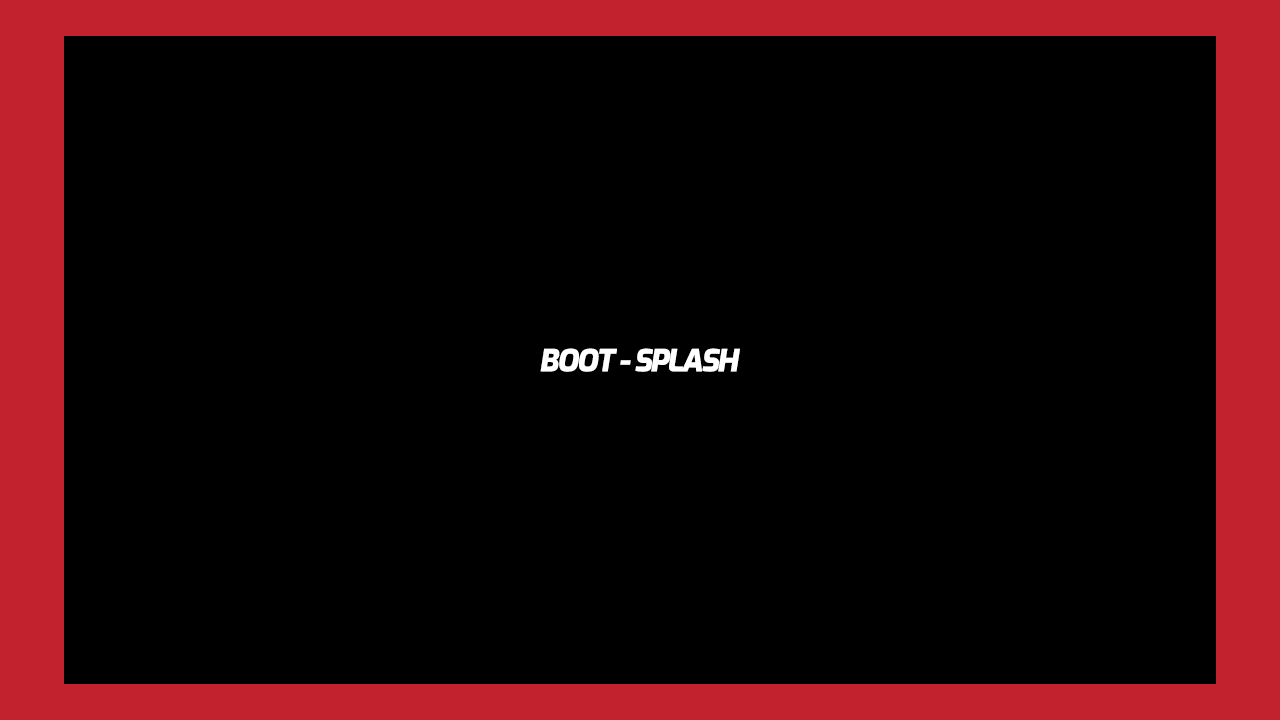
<style>
.page{position:relative;width:1280px;height:720px;background:#000000}
.page>*{position:absolute;margin:0}
.t1{font:30px "Exo-ExtraBoldItalic";letter-spacing:-0.075em;color:#ffffff;font-weight:bold}
</style>
<div class="page">
<p class="t1" style="left:540px;top:348px;width:200px;height:24px">BOOT - SPLASH</p>
</div>
